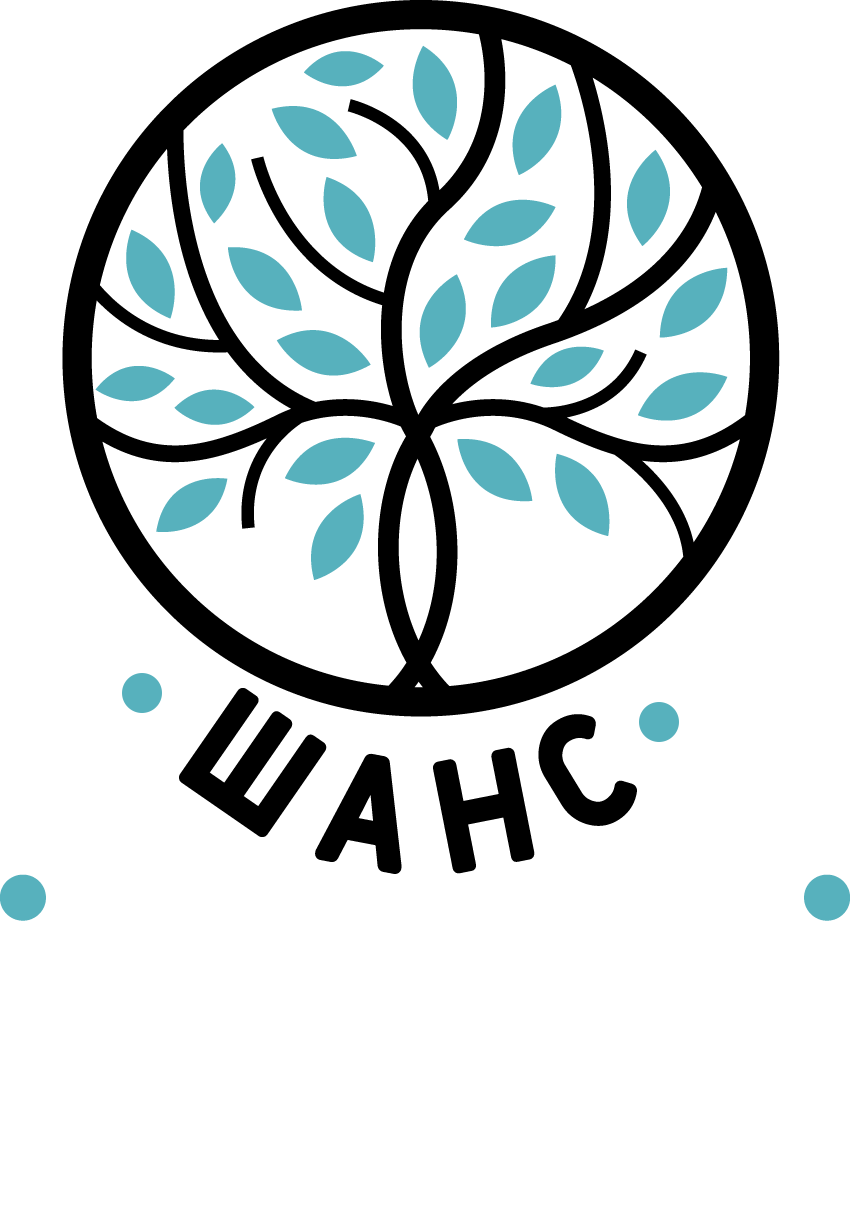
<style>
.page{position:relative;width:850px;height:1208px;background:#ffffff}
.page>*{position:absolute;margin:0}
.t1{font:160px "Fulbo-Argenta";letter-spacing:-0.05em;color:#000000;text-transform:uppercase}
</style>
<div class="page">
<p class="t1" style="left:179px;top:688px;width:458px;height:186px">Ш А Н С</p>
</div>
